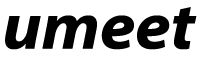
<style>
.page{position:relative;width:200px;height:60px;background:#ffffff}
.page>*{position:absolute;margin:0}
.t1{font:66px "MyriadPro-BoldIt";color:#000000;scale:1.06 1}
</style>
<div class="page">
<p class="t1" style="left:5px;top:7px;width:192px;height:43px">umeet</p>
</div>
